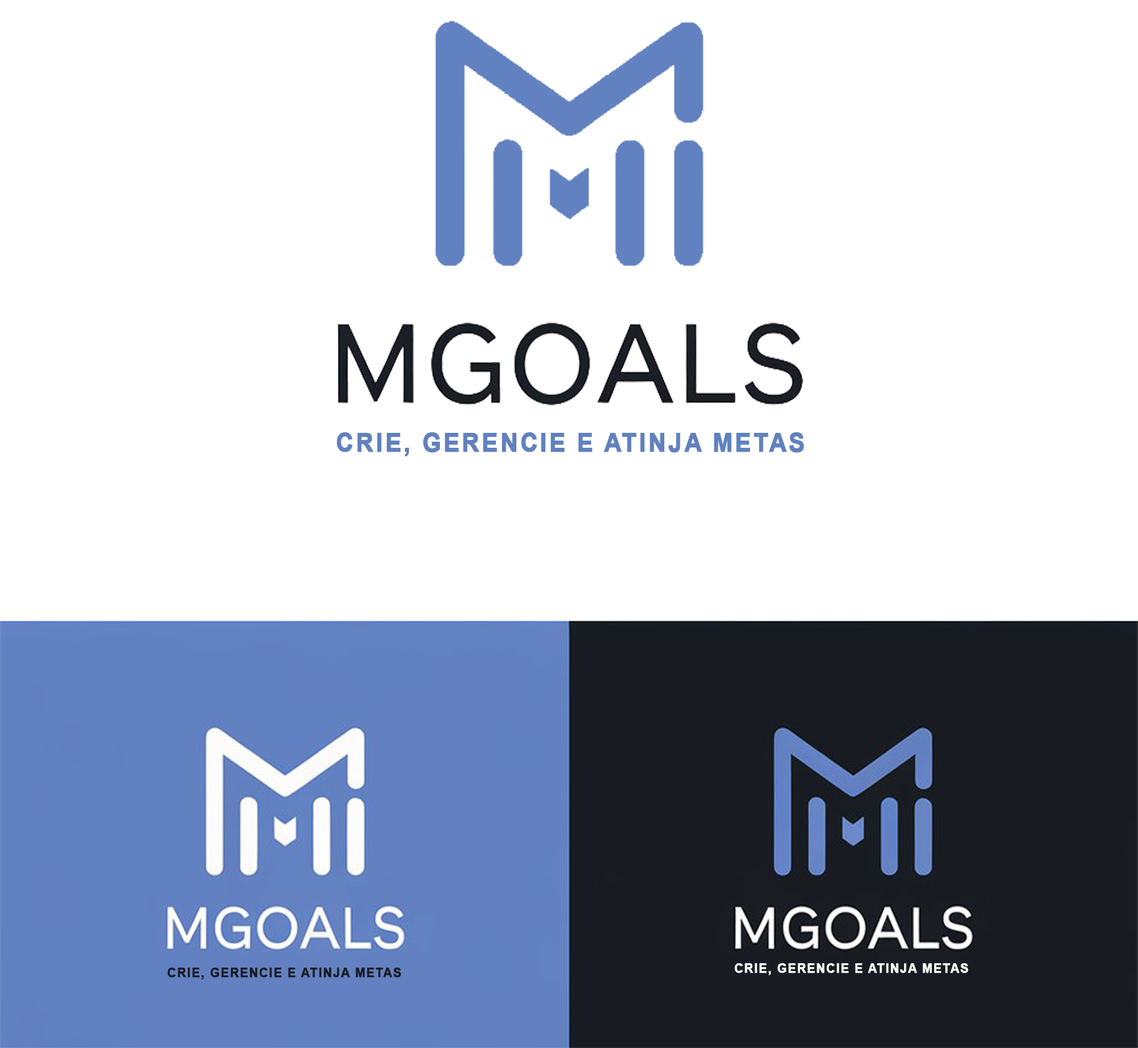
<style>
.page{position:relative;width:1138px;height:1048px;background:#ffffff}
.page>*{position:absolute;margin:0}
.t1{font:26.2px "Arial-BoldMT";letter-spacing:0.08em;color:#6181be;text-transform:uppercase;font-weight:bold;scale:0.91 1}
.t2{font:13.5px "Arial-BoldMT";letter-spacing:0.08em;color:#fafcf9;text-transform:uppercase;font-weight:bold;scale:0.89 1}
.t3{font:13.5px "Arial-BoldMT";letter-spacing:0.08em;color:#181b22;text-transform:uppercase;font-weight:bold;scale:0.89 1}
</style>
<div class="page">
<p class="t1" style="left:337px;top:432px;width:467px;height:25px">CRIE, GERENCIE E ATINJA METAS</p>
<p class="t2" style="left:735px;top:963px;width:234px;height:12px">CRIE, GERENCIE E ATINJA METAS</p>
<p class="t3" style="left:167px;top:967px;width:234px;height:13px">CRIE, GERENCIE E ATINJA METAS</p>
</div>
